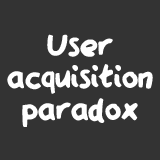
<style>
.page{position:relative;width:160px;height:160px;background:#333333}
.page>*{position:absolute;margin:0}
.t1{font:35.9px/31.9px "QAReports";color:#ffffff}
</style>
<div class="page">
<p class="t1" style="left:7px;top:34px;width:146px;height:93px;text-align:center">User<br>acquisition<br>paradox</p>
</div>
